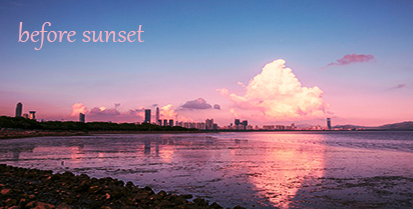
<style>
.page{position:relative;width:413px;height:209px}
.page>*{position:absolute;margin:0}
.t1{font:31.5px "Gabriola";color:#f1b1c3}
</style>
<div class="page">
<p class="t1" style="left:18px;top:22px;width:127px;height:28px">before sunset</p>
</div>
